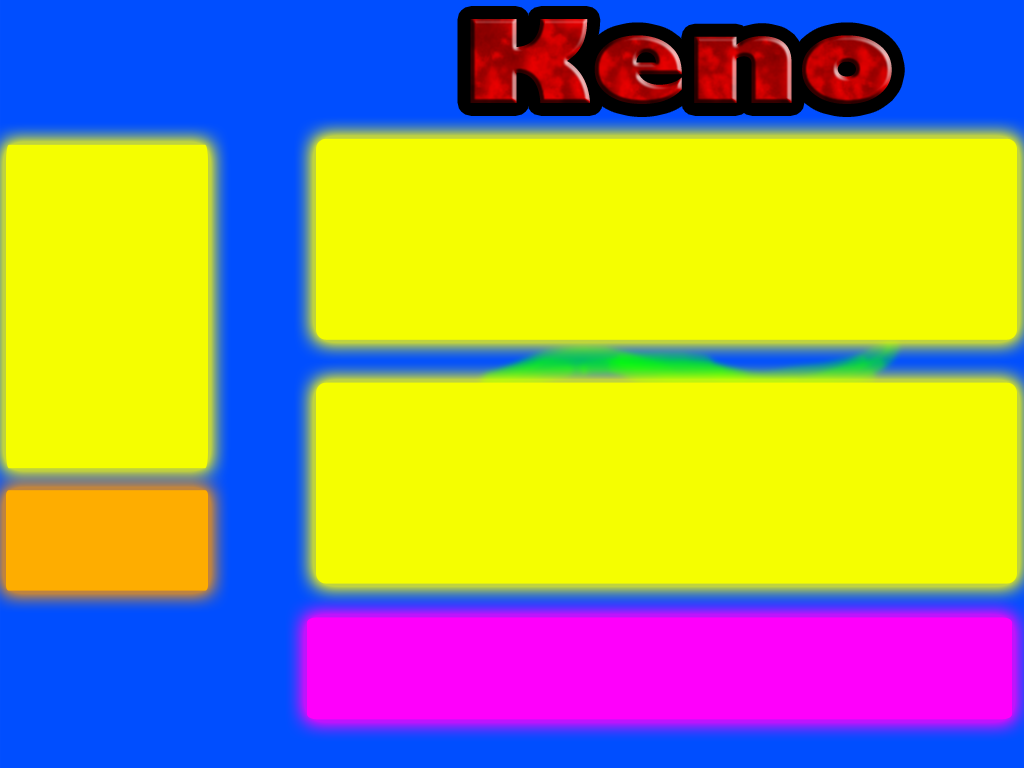
<style>
.page{position:relative;width:1024px;height:768px;background:#f5fe00}
.page>*{position:absolute;margin:0}
.t1{font:112.3px "GillSans-UltraBold";scale:1.24 1}
</style>
<div class="page">
<p class="t1" style="left:470px;top:19px;width:422px;height:85px">Keno</p>
</div>
